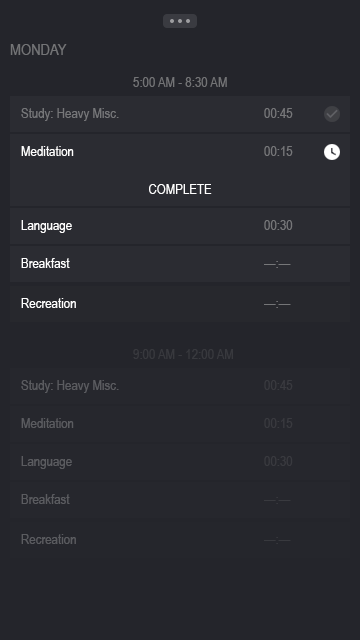
<style>
.page{position:relative;width:360px;height:640px;background:#24252b}
.page>*{position:absolute;margin:0}
.t1{font:16px "ArialNarrow";color:#737476}
.t2{font:14px "ArialNarrow";color:#737476}
.t3{font:14px "ArialNarrow";color:#767779}
.t4{font:14px "ArialNarrow";color:#ffffff}
.t5{font:14px "ArialNarrow";color:#747577}
.t6{font:14px "ArialNarrow";color:#38393e}
.t7{font:14px "ArialNarrow";color:#5b5c60}
.t8{font:14px "ArialNarrow";color:#393a3f}
</style>
<div class="page">
<p class="t1" style="left:10px;top:44px;width:57px;height:11px">MONDAY</p>
<p class="t2" style="left:133px;top:77px;width:94px;height:10px">5:00 AM - 8:30 AM</p>
<p class="t3" style="left:21px;top:108px;width:98px;height:13px">Study: Heavy Misc.</p>
<p class="t3" style="left:264px;top:108px;width:29px;height:10px">00:45</p>
<p class="t4" style="left:21px;top:146px;width:53px;height:10px">Meditation</p>
<p class="t3" style="left:264px;top:146px;width:29px;height:10px">00:15</p>
<p class="t4" style="left:149px;top:184px;width:63px;height:10px">COMPLETE</p>
<p class="t4" style="left:21px;top:220px;width:51px;height:13px">Language</p>
<p class="t3" style="left:264px;top:220px;width:29px;height:10px">00:30</p>
<p class="t4" style="left:21px;top:258px;width:49px;height:10px">Breakfast</p>
<p class="t3" style="left:264px;top:261px;width:27px;height:7px">—:—</p>
<p class="t4" style="left:21px;top:298px;width:55px;height:10px">Recreation</p>
<p class="t5" style="left:264px;top:301px;width:27px;height:7px">—:—</p>
<p class="t6" style="left:133px;top:349px;width:100px;height:10px">9:00 AM - 12:00 AM</p>
<p class="t7" style="left:21px;top:380px;width:98px;height:13px">Study: Heavy Misc.</p>
<p class="t8" style="left:264px;top:380px;width:29px;height:10px">00:45</p>
<p class="t7" style="left:21px;top:418px;width:53px;height:10px">Meditation</p>
<p class="t8" style="left:264px;top:418px;width:29px;height:10px">00:15</p>
<p class="t7" style="left:21px;top:456px;width:51px;height:13px">Language</p>
<p class="t8" style="left:264px;top:456px;width:29px;height:10px">00:30</p>
<p class="t7" style="left:21px;top:494px;width:49px;height:10px">Breakfast</p>
<p class="t8" style="left:264px;top:497px;width:27px;height:7px">—:—</p>
<p class="t7" style="left:21px;top:534px;width:55px;height:10px">Recreation</p>
<p class="t6" style="left:264px;top:537px;width:27px;height:7px">—:—</p>
</div>
